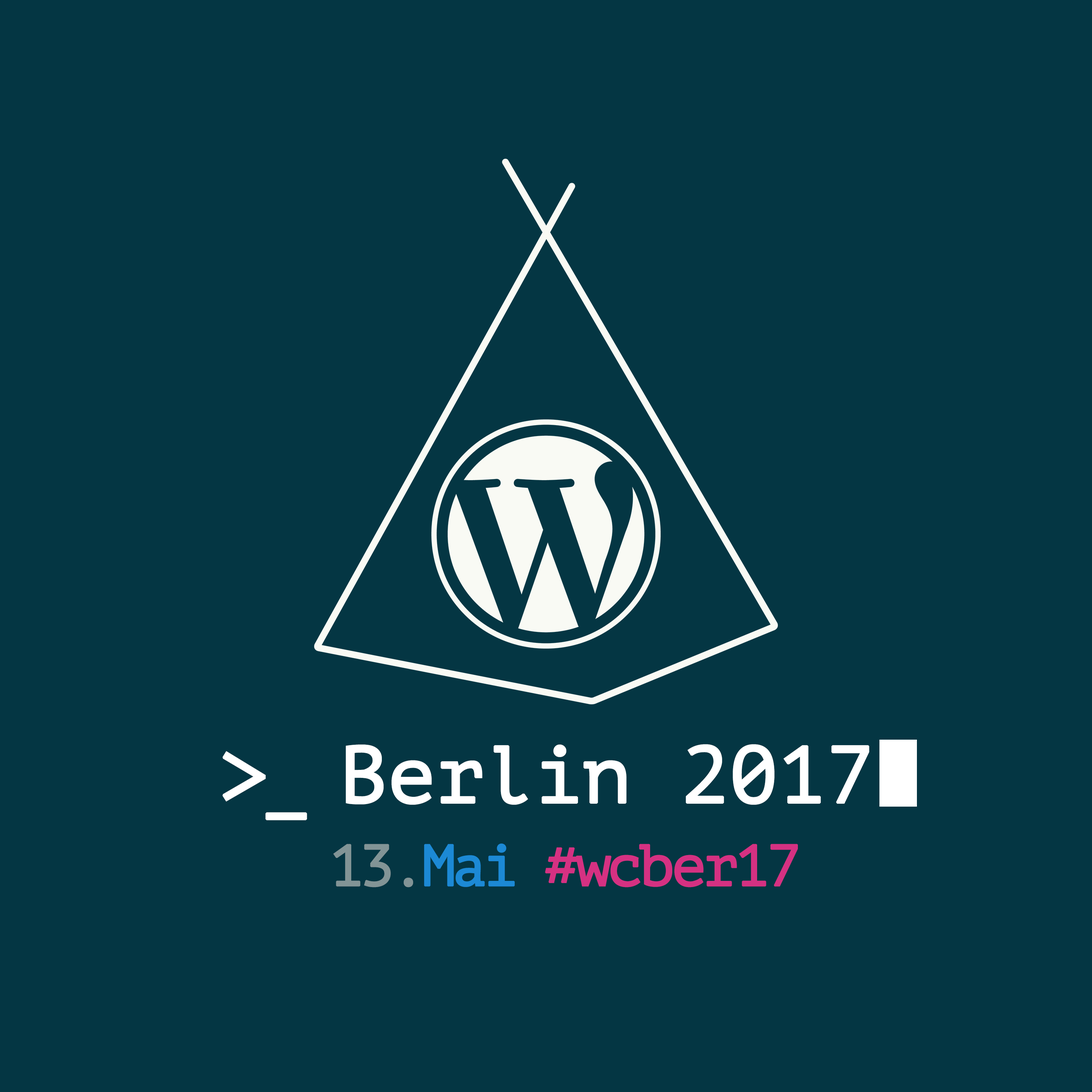
<style>
.page{position:relative;width:1092px;height:1092px;background:#043643}
.page>*{position:absolute;margin:0}
.t1{font:80.4px "PTMono-Regular";letter-spacing:-0.02em;color:#ffffff;font-weight:bold}
.t2{font:80.4px "PTMono-Regular";letter-spacing:-0.1em;color:#ffffff;font-weight:bold}
.t3{font:58.2px "PTMono-Regular";letter-spacing:-0.08em;color:#d53182;font-weight:bold}
.t4{font:58.2px "PTMono-Regular";letter-spacing:-0.1em;color:#829496;font-weight:bold}
.t5{font:58.2px "PTMono-Regular";letter-spacing:-0.1em;color:#1c89d5;font-weight:bold}
</style>
<div class="page">
<p class="t1" style="left:222px;top:744px;width:647px;height:76px"><span class="t2">&gt;_ </span>Berlin 2017</p>
<p class="t3" style="left:333px;top:843px;width:465px;height:44px"><span class="t4">13.</span><span class="t5">Mai </span>#wcber17</p>
</div>
